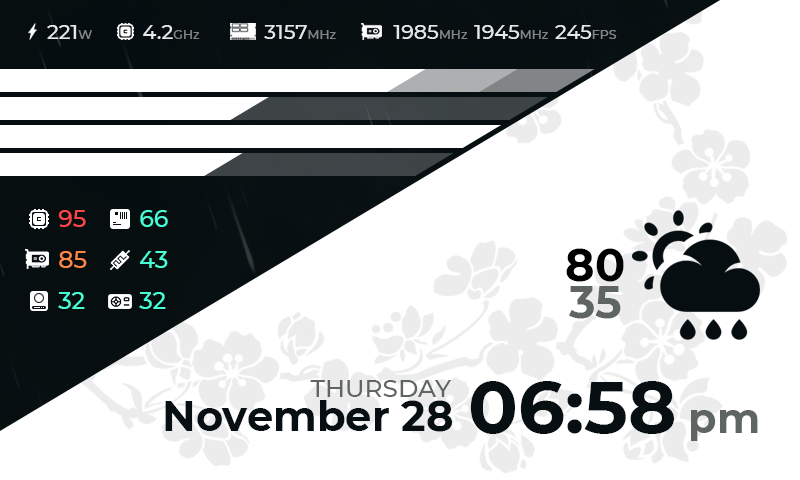
<style>
.page{position:relative;width:800px;height:480px;background:#ffffff}
.page>*{position:absolute;margin:0}
.t1{font:20.5px "Montserrat-Medium";color:#e6e7e7}
.t2{font:12.4px "Montserrat-Medium";color:#818586}
.t3{font:23.6px "Montserrat-Medium";color:#ff4646}
.t4{font:23.6px "Montserrat-Medium";color:#46ffd6}
.t5{font:23.6px "Montserrat-Medium";color:#ff8746}
.t6{font:44.7px "Montserrat-Bold";color:#000000}
.t7{font:44.7px "Montserrat-Bold";color:#5f6465}
.t8{font:24.7px "Montserrat-Medium";color:#5f6465}
.t9{font:73.6px "Montserrat-Bold";color:#070f12}
.t10{font:41.6px "Montserrat-Bold";color:#070f12}
.t11{font:41.2px "Montserrat-Bold";color:#5f6465}
</style>
<div class="page">
<p class="t1" style="left:47px;top:25px;width:45px;height:14px">221<span class="t2">W</span></p>
<p class="t1" style="left:143px;top:25px;width:57px;height:14px">4.2<span class="t2">GHz</span></p>
<p class="t1" style="left:264px;top:25px;width:72px;height:14px">3157<span class="t2">MHz</span></p>
<p class="t1" style="left:393px;top:25px;width:224px;height:14px">1985<span class="t2">MHz  </span>1945<span class="t2">MHz  </span>245<span class="t2">FPS</span></p>
<p class="t3" style="left:58px;top:210px;width:28px;height:17px">95</p>
<p class="t4" style="left:140px;top:210px;width:28px;height:17px">66</p>
<p class="t5" style="left:59px;top:251px;width:28px;height:17px">85</p>
<p class="t4" style="left:140px;top:251px;width:28px;height:17px">43</p>
<p class="t6" style="left:566px;top:248px;width:58px;height:34px">80</p>
<p class="t4" style="left:58px;top:292px;width:27px;height:17px">32</p>
<p class="t4" style="left:139px;top:292px;width:27px;height:17px">32</p>
<p class="t7" style="left:569px;top:286px;width:52px;height:33px">35</p>
<p class="t8" style="left:310px;top:380px;width:142px;height:17px">THURSDAY</p>
<p class="t9" style="left:470px;top:381px;width:204px;height:53px">06:58</p>
<p class="t10" style="left:165px;top:400px;width:287px;height:32px">November 28</p>
<p class="t11" style="left:691px;top:410px;width:67px;height:31px">pm</p>
</div>
